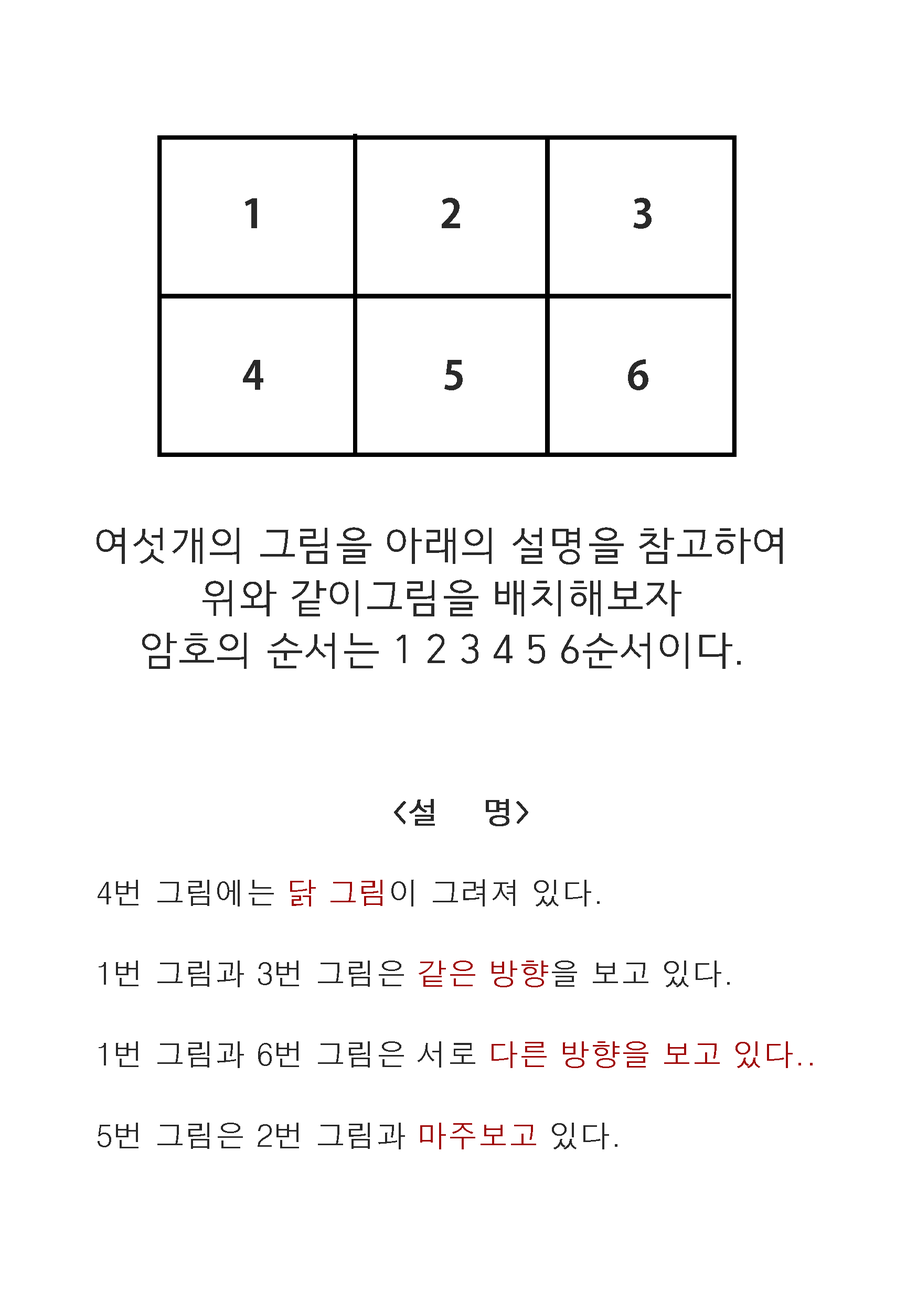
<style>
.page{position:relative;width:917px;height:1301px;background:#ffffff}
.page>*{position:absolute;margin:0}
.t1{font:39.3px/80.9px "AdobeGothicStd-Bold";color:#292929}
.t2{font:39.3px/26.2px "HCRDotum";color:#292929}
.t3{font:30.6px/80.9px "H2gtrM";color:#292929}
.t4{font:39.3px/80.9px "GulimChe";color:#292929}
.t5{font:30.6px/80.9px "H2gtrM";color:#292929;font-weight:bold}
.t6{font:30.6px/80.9px "H2gtrM";color:#a00909}
</style>
<div class="page">
<p class="t1" style="left:243px;top:198px;width:408px;height:192px">1          2                    3<br><br>4                     5                   6</p>
<p class="t2" style="left:97px;top:527px;width:686px;height:142px;text-align:center">여섯개의 그림을 아래의 설명을 참고하여<br><br>위와 같이그림을 배치해보자<br><br>암호의 순서는 1 2 3 4 5 6순서이다.</p>
<p class="t3" style="left:98px;top:799px;width:714px;height:350px"><span class="t4">               </span><span class="t5">&lt;설    명&gt;<br></span>4번 그림에는 <span class="t6">닭 그림</span>이 그려져 있다.<br>1번 그림과 3번 그림은 <span class="t6">같은 방향</span>을 보고 있다.<br>1번 그림과 6번 그림은 서로 <span class="t6">다른 방향을 보고 있다..<br></span>5번 그림은 2번 그림과 <span class="t6">마주보고</span> 있다.</p>
</div>
